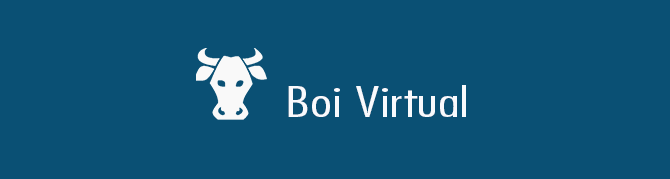
<style>
.page{position:relative;width:670px;height:179px;background:#0a5074}
.page>*{position:absolute;margin:0}
.t1{font:40px "FuturaStd-CondensedLight";color:#f9fafd;scale:1.56 1}
</style>
<div class="page">
<p class="t1" style="left:288px;top:85px;width:178px;height:32px">Boi Virtual</p>
</div>
